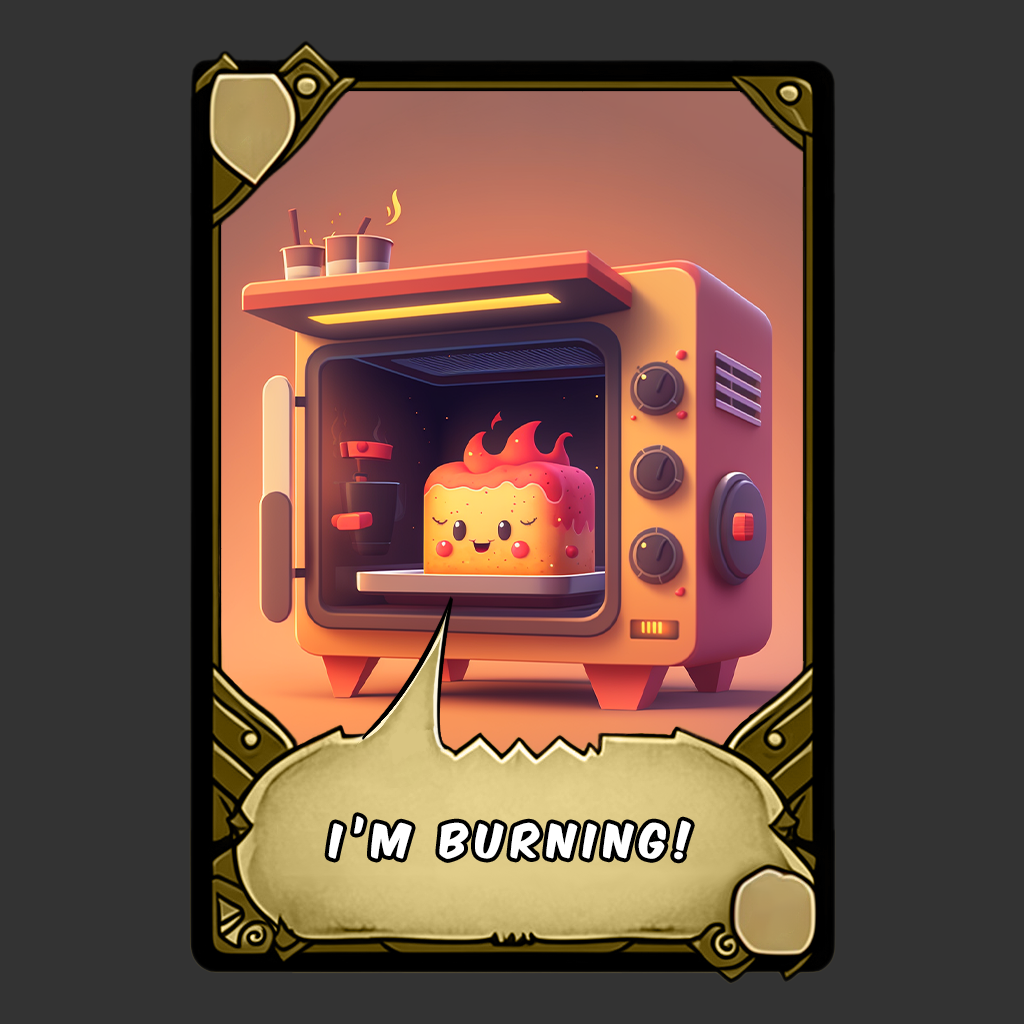
<style>
.page{position:relative;width:1024px;height:1024px;background:#333333}
.page>*{position:absolute;margin:0}
.t1{font:40px "KomikaAxis";letter-spacing:0.2em;color:#ffffff}
</style>
<div class="page">
<p class="t1" style="left:328px;top:816px;width:363px;height:44px">I’m BURNING!</p>
</div>
